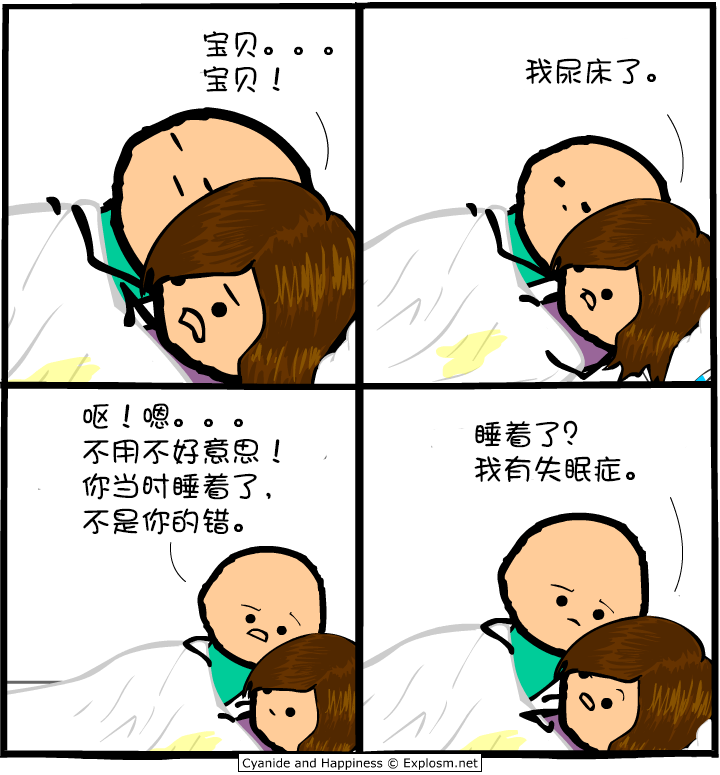
<style>
.page{position:relative;width:720px;height:775px;background:#ffffff}
.page>*{position:absolute;margin:0}
.t1{font:30px/35px "DFPShaoNvW5";color:#000000}
.t2{font:30px "DFPShaoNvW5";color:#000000}
</style>
<div class="page">
<p class="t1" style="left:203px;top:31px;width:130px;height:62px">宝贝。。。<br>宝贝！</p>
<p class="t2" style="left:525px;top:58px;width:131px;height:26px">我尿床了。</p>
<p class="t1" style="left:82px;top:403px;width:198px;height:132px">呕！嗯。。。<br>不用不好意思！<br>你当时睡着了，<br>不是你的错。</p>
<p class="t1" style="left:474px;top:420px;width:161px;height:62px">睡着了？<br>我有失眠症。</p>
</div>
